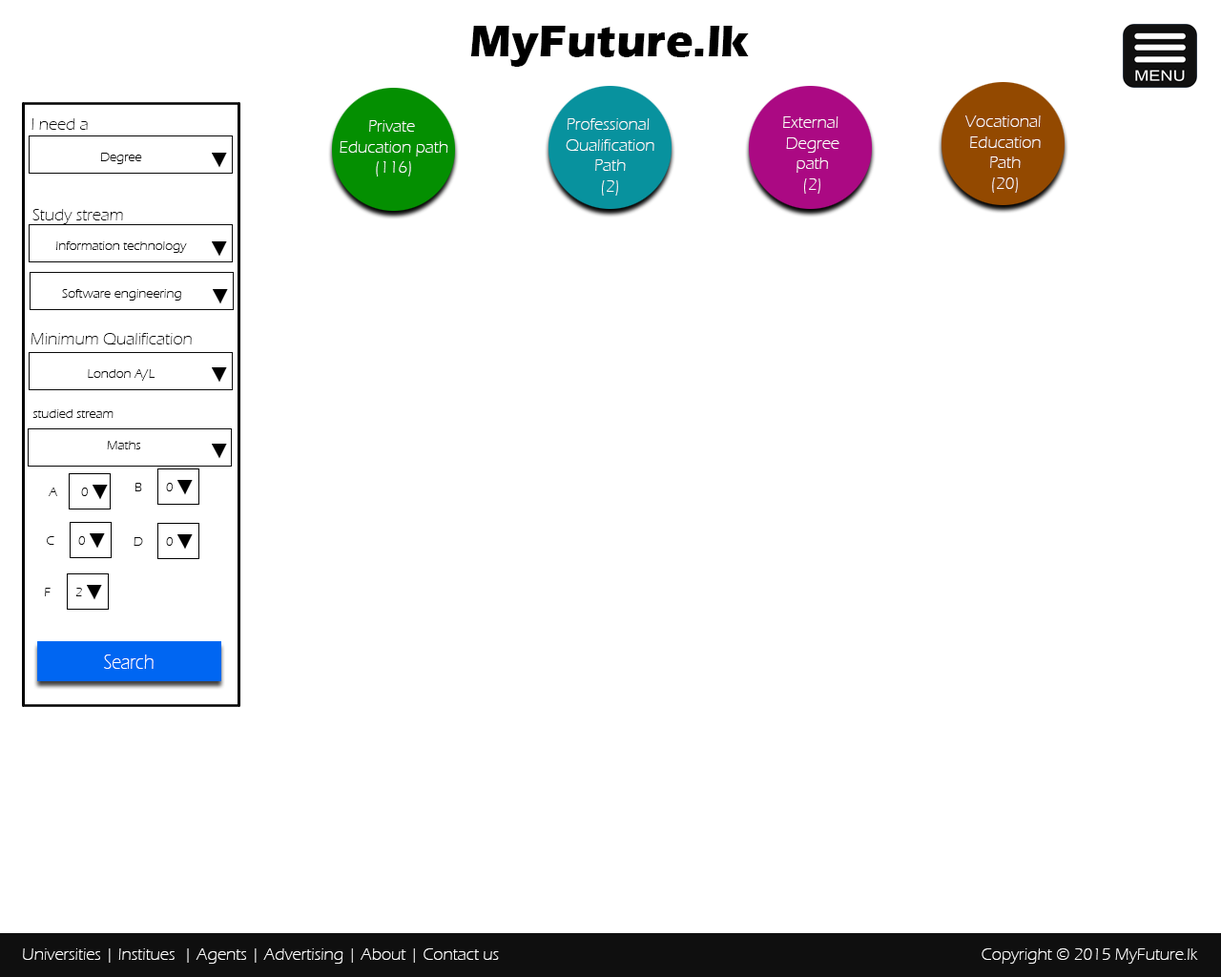
<style>
.page{position:relative;width:1221px;height:977px;background:#ffffff}
.page>*{position:absolute;margin:0}
.t1{font:45.8px "ErasITC-Bold";color:#000000}
.t2{font:17.2px "ErasITC-Light";color:#090909}
.t3{font:17.2px "ErasITC-Light";color:#fffefe}
.t4{font:13.4px "ErasITC-Light";color:#090909}
.t5{font:21.6px "ErasITC-Light";color:#ffffff;scale:0.83 1}
.t6{font:17.2px "ErasITC-Light";color:#ffffff}
</style>
<div class="page">
<p class="t1" style="left:470px;top:26px;width:279px;height:41px">MyFuture.lk</p>
<p class="t2" style="left:31px;top:118px;width:57px;height:12px">I need a</p>
<p class="t3" style="left:340px;top:120px;width:108px;height:56px;text-align:center">Private <br>Education path<br>(116)</p>
<p class="t3" style="left:566px;top:118px;width:88px;height:78px;text-align:center">Professional <br>Qualification<br>Path<br>(2)</p>
<p class="t3" style="left:783px;top:116px;width:56px;height:78px;text-align:center">External <br>Degree<br>path<br>(2)</p>
<p class="t3" style="left:965px;top:115px;width:76px;height:78px;text-align:center">Vocational <br>Education<br>Path<br>(20)</p>
<p class="t4" style="left:100px;top:153px;width:42px;height:11px">Degree</p>
<p class="t2" style="left:32px;top:209px;width:91px;height:15px">Study stream</p>
<p class="t4" style="left:56px;top:241px;width:131px;height:12px">Information technology</p>
<p class="t4" style="left:62px;top:289px;width:119px;height:11px">Software engineering</p>
<p class="t2" style="left:31px;top:333px;width:161px;height:11px">Minimum Qualification</p>
<p class="t4" style="left:88px;top:369px;width:67px;height:12px">London A/L</p>
<p class="t4" style="left:32px;top:409px;width:82px;height:9px">studied stream</p>
<p class="t4" style="left:107px;top:441px;width:33px;height:8px">Maths</p>
<p class="t4" style="left:134px;top:483px;width:8px;height:8px">B</p>
<p class="t4" style="left:166px;top:483px;width:7px;height:8px">0</p>
<p class="t4" style="left:49px;top:487px;width:8px;height:9px">A</p>
<p class="t4" style="left:81px;top:487px;width:7px;height:9px">0</p>
<p class="t4" style="left:47px;top:536px;width:7px;height:9px">C</p>
<p class="t4" style="left:78px;top:536px;width:7px;height:9px">0</p>
<p class="t4" style="left:134px;top:537px;width:9px;height:9px">D</p>
<p class="t4" style="left:166px;top:537px;width:7px;height:9px">0</p>
<p class="t4" style="left:45px;top:588px;width:6px;height:8px">F</p>
<p class="t4" style="left:75px;top:588px;width:7px;height:8px">2</p>
<p class="t5" style="left:104px;top:654px;width:50px;height:15px">Search</p>
<p class="t6" style="left:23px;top:948px;width:476px;height:15px">Universities | Institues  | Agents | Advertising | About | Contact us</p>
<p class="t6" style="left:981px;top:948px;width:217px;height:15px">Copyright © 2015 MyFuture.lk</p>
</div>
